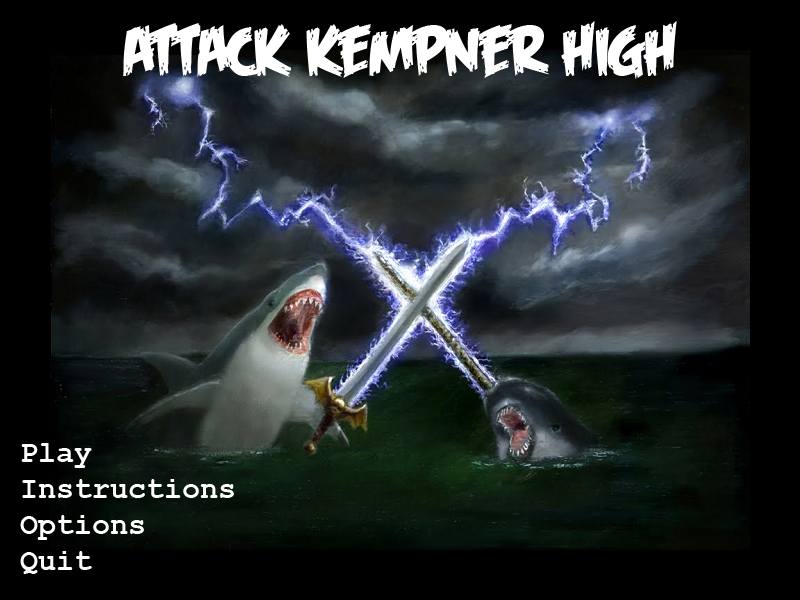
<style>
.page{position:relative;width:800px;height:600px;background:#000000}
.page>*{position:absolute;margin:0}
.t1{font:70px "FeastofFleshBB";color:#ffffff}
.t2{font:30px "CourierNewPS-BoldMT";color:#ffffff}
</style>
<div class="page">
<p class="t1" style="left:123px;top:21px;width:554px;height:58px">Attack kempner high</p>
<p class="t2" style="left:20px;top:443px;width:214px;height:131px">Play<br>Instructions<br>Options<br>Quit</p>
</div>
